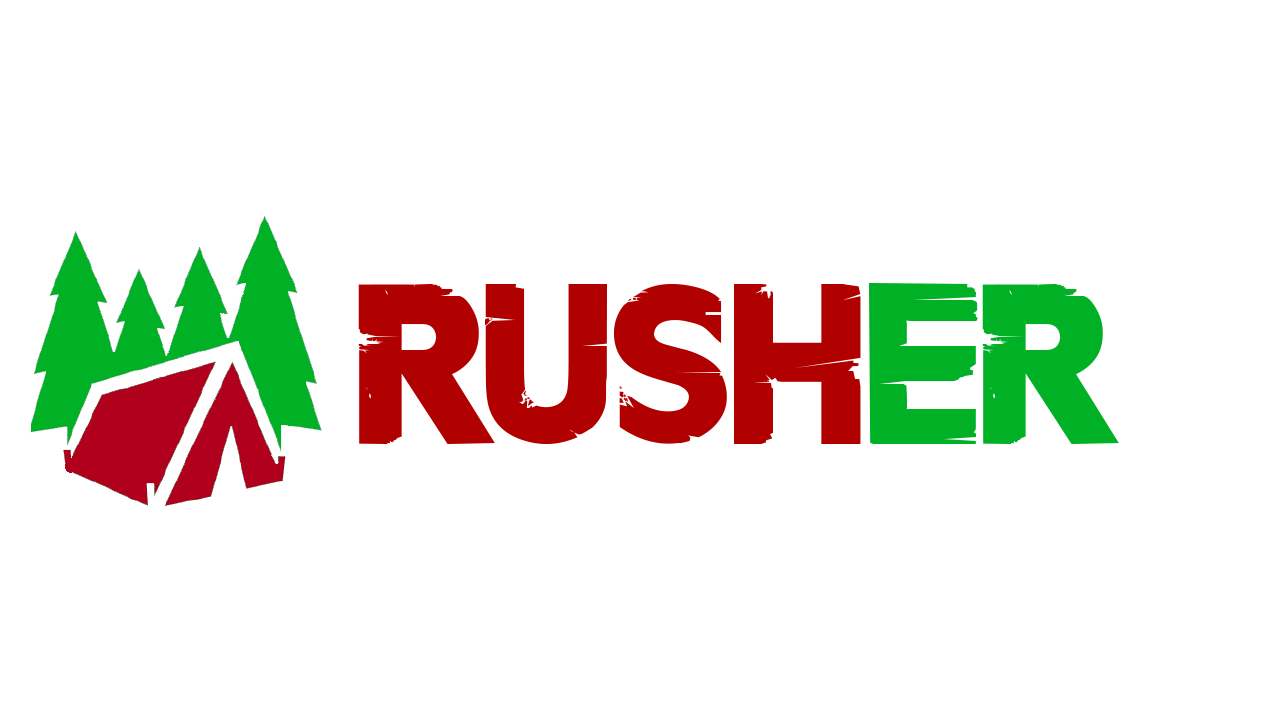
<style>
.page{position:relative;width:1280px;height:720px;background:#ffffff}
.page>*{position:absolute;margin:0}
.t1{font:200px "FarCryExtraBold";color:#b10000}
.t2{font:200px "FarCryExtraBold";color:#00b125}
</style>
<div class="page">
<p class="t1" style="left:358px;top:283px;width:761px;height:161px">RUSH<span class="t2">ER</span></p>
</div>
